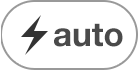
<style>
.page{position:relative;width:140px;height:70px;background:#ffffff}
.page>*{position:absolute;margin:0}
.t1{font:33.3px "HelveticaNeue-Bold";color:#4a4a4a}
</style>
<div class="page">
<p class="t1" style="left:54px;top:23px;width:69px;height:24px">auto</p>
</div>
